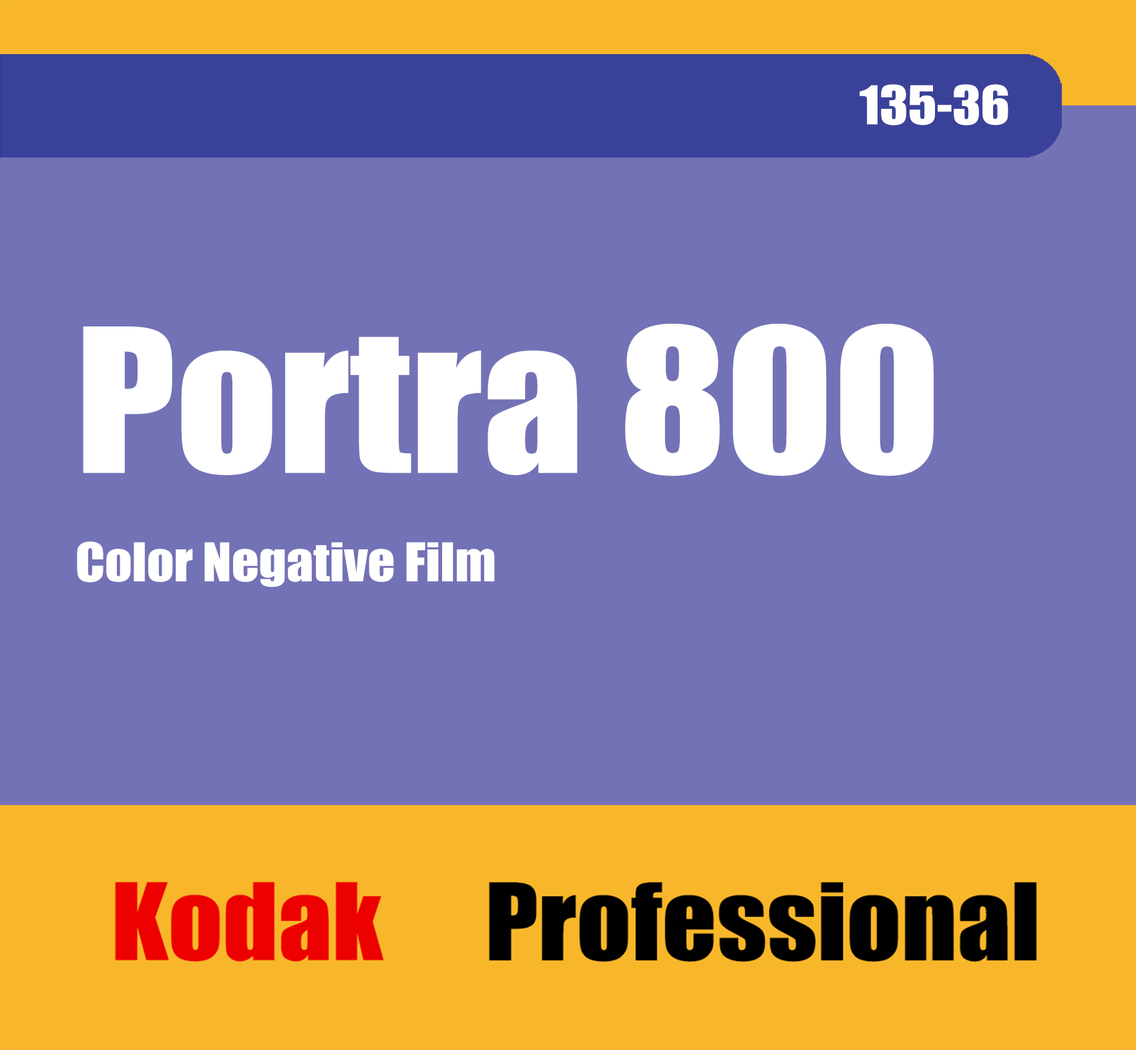
<style>
.page{position:relative;width:1136px;height:1050px;background:#7372b6}
.page>*{position:absolute;margin:0}
.t1{font:49.4px "Impact";color:#ffffff;scale:1.08 1}
.t2{font:185.2px "Impact";color:#ffffff;scale:1.08 1}
</style>
<div class="page">
<p class="t1" style="left:859px;top:84px;width:149px;height:42px">135-36</p>
<p class="t2" style="left:83px;top:324px;width:850px;height:152px">Portra 800</p>
<p class="t1" style="left:77px;top:541px;width:418px;height:46px">Color Negative Film</p>
</div>
